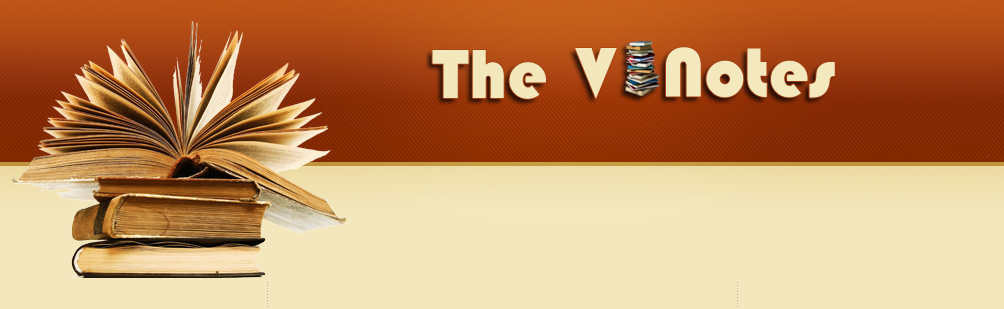
<style>
.page{position:relative;width:1004px;height:309px;background:#f4e7bd}
.page>*{position:absolute;margin:0}
.t1{font:72px "Bauhaus93";color:#f3e7bc}
.t2{font:72px "Bauhaus93";color:#f4e7be}
.t3{font:72px "Bauhaus93";color:#f4e8be}
</style>
<div class="page">
<p class="t1" style="left:432px;top:50px;width:114px;height:49px">The</p>
<p class="t2" style="left:575px;top:48px;width:42px;height:51px">V</p>
<p class="t3" style="left:666px;top:47px;width:169px;height:51px">Notes</p>
</div>
